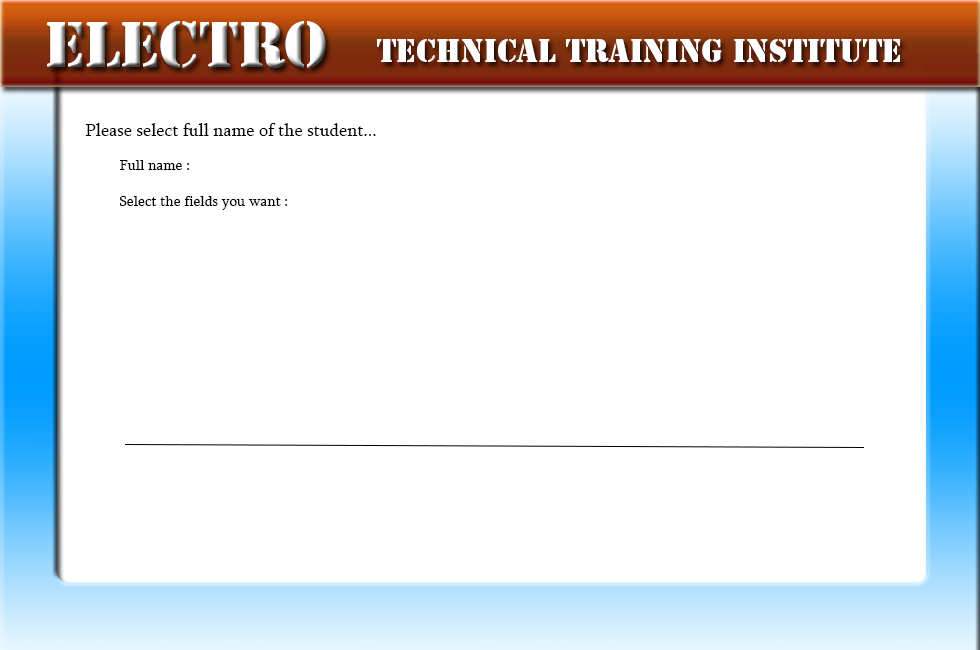
<style>
.page{position:relative;width:980px;height:650px;background:#ffffff}
.page>*{position:absolute;margin:0}
.t1{font:60px "StencilStd";color:#ffffff}
.t2{font:30px "StencilStd";color:#ffffff}
.t3{font:18px "Sylfaen";color:#000000}
.t4{font:15px "Sylfaen";color:#000000}
</style>
<div class="page">
<p class="t1" style="left:47px;top:21px;width:279px;height:47px">Electro</p>
<p class="t2" style="left:377px;top:39px;width:523px;height:23px">Technical Training Institute</p>
<p class="t3" style="left:85px;top:123px;width:291px;height:13px">Please select full name of the student...</p>
<p class="t4" style="left:119px;top:160px;width:169px;height:50px">Full name :<br><br>Select the fields you want :</p>
</div>
